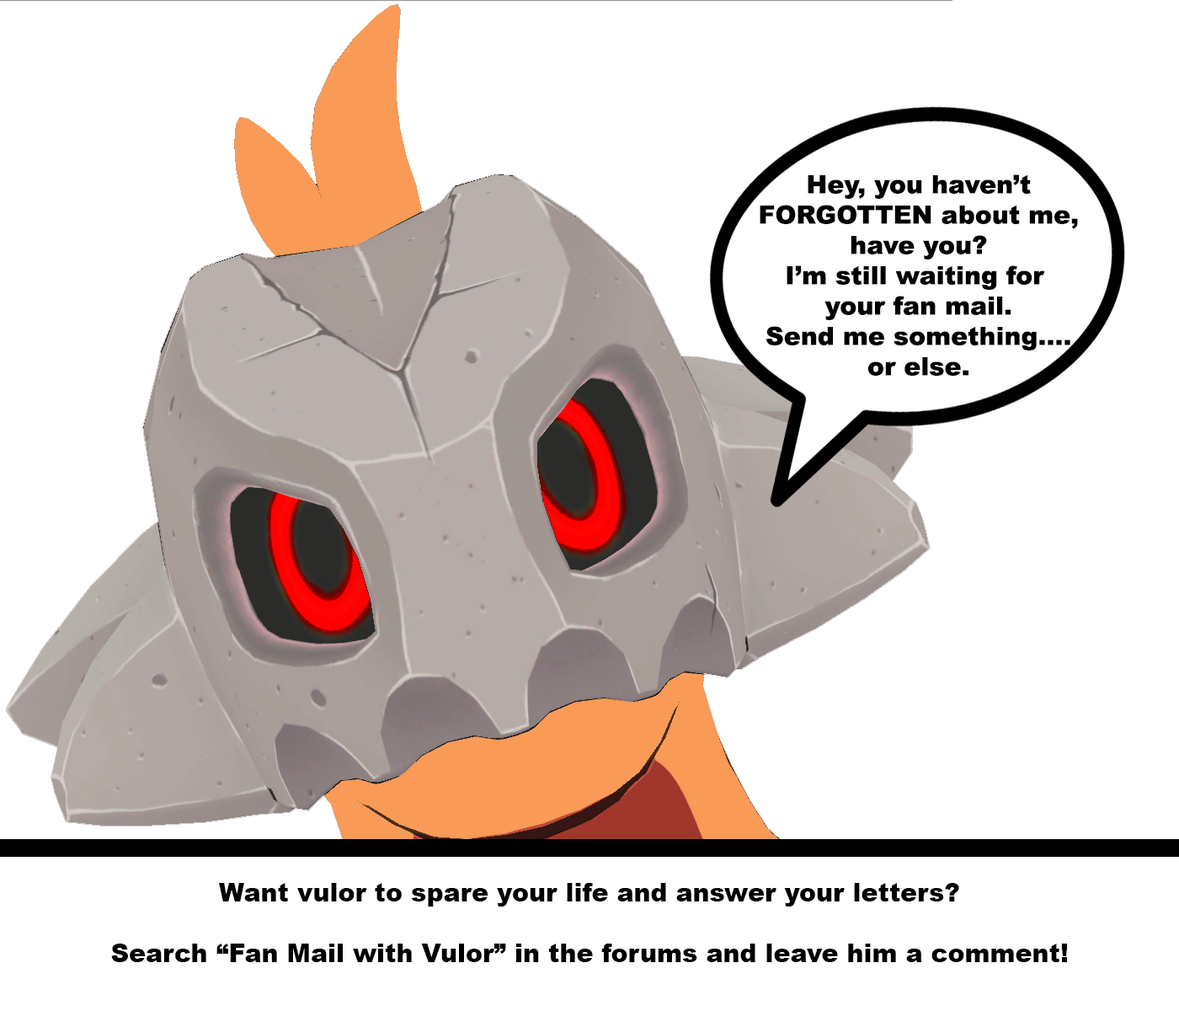
<style>
.page{position:relative;width:1179px;height:1011px;background:#ffffff}
.page>*{position:absolute;margin:0}
.t1{font:25.3px "Arial-Black";color:#000000}
</style>
<div class="page">
<p class="t1" style="left:760px;top:174px;width:318px;height:202px;text-align:center">Hey, you haven’t<br>FORGOTTEN about me,<br>have you?<br>I’m still waiting for <br>your fan mail.<br>Send me something....<br>or else.</p>
<p class="t1" style="left:111px;top:883px;width:957px;height:79px;text-align:center">Want vulor to spare your life and answer your letters?<br><br>Search “Fan Mail with Vulor” in the forums and leave him a comment!</p>
</div>
